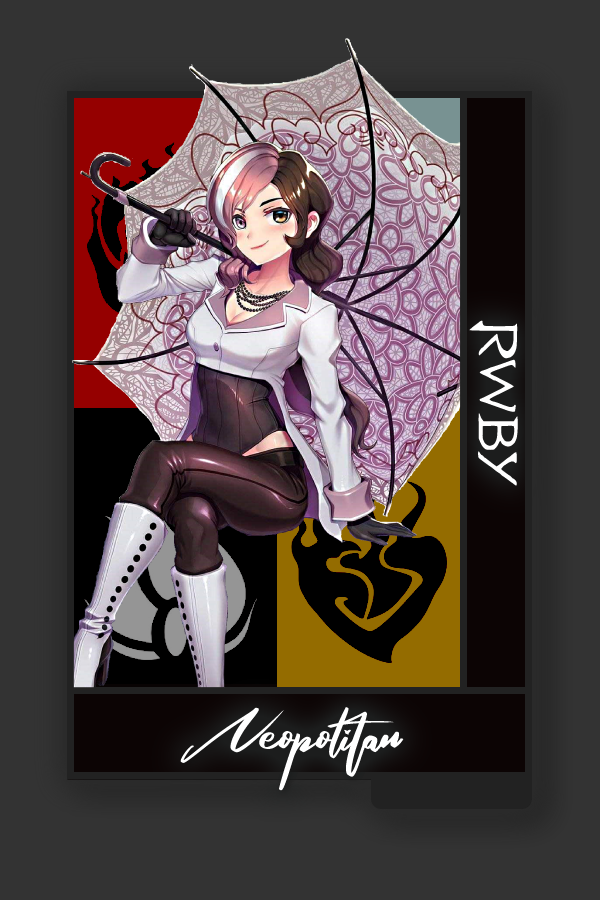
<style>
.page{position:relative;width:600px;height:900px;background:#333333}
.page>*{position:absolute;margin:0}
.t1{font:61.3px "RWBY_Style";color:#ffffff;scale:1.25 1}
.t2{font:76.6px "RosegaFREE";color:#ffffff;scale:0.91 1}
</style>
<div class="page">
<p class="t1" style="left:469px;top:320px;width:49px;height:166px;rotate:90deg">RWBY</p>
<p class="t2" style="left:180px;top:707px;width:224px;height:84px">Neopolitan</p>
</div>
